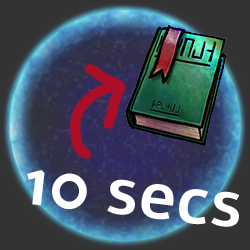
<style>
.page{position:relative;width:250px;height:250px;background:#333333}
.page>*{position:absolute;margin:0}
.t1{font:65.9px "Alef-Bold";color:#ffffff}
</style>
<div class="page">
<p class="t1" style="left:27px;top:170px;width:213px;height:57px;rotate:7deg">10 secs</p>
</div>
